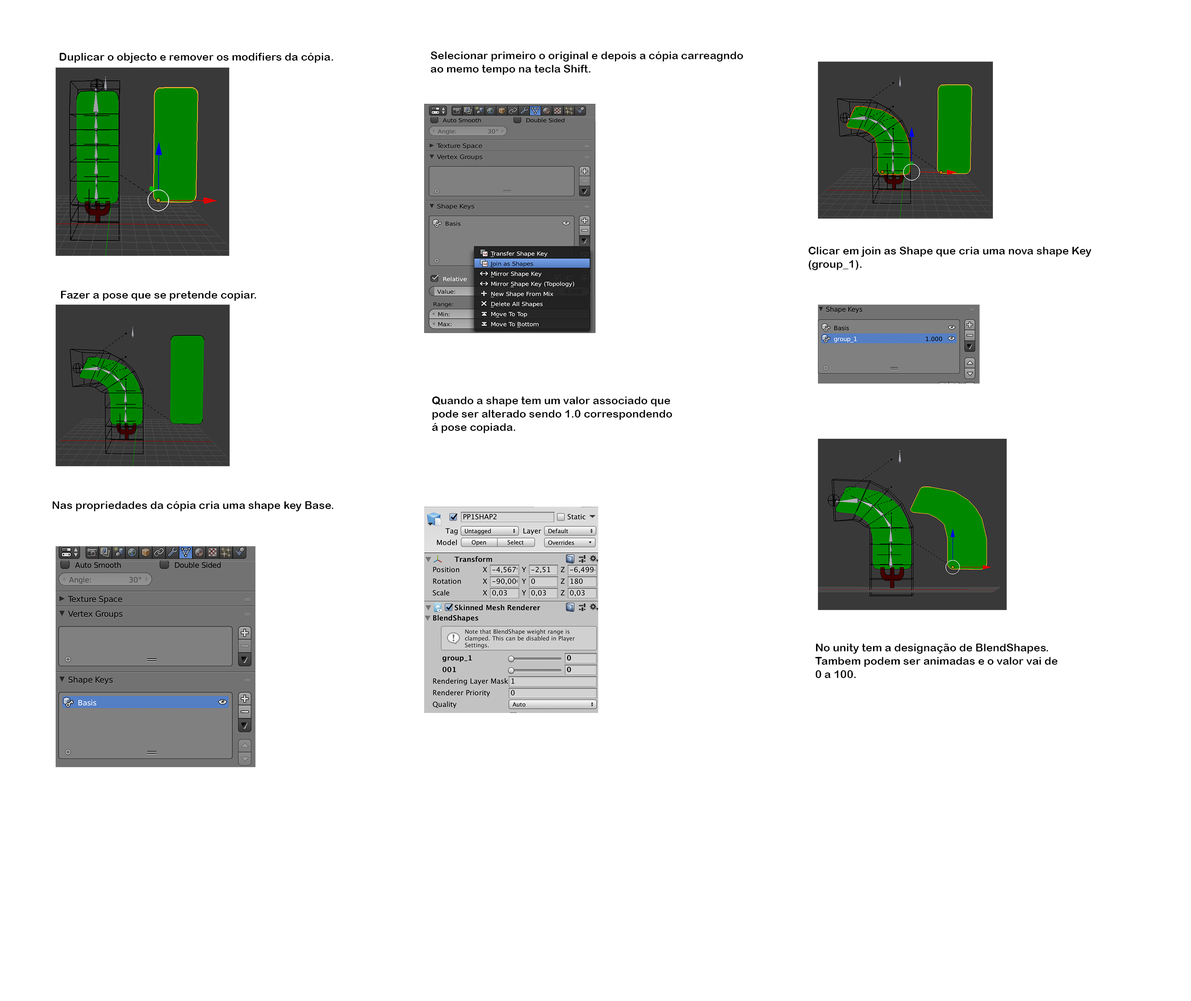
<style>
.page{position:relative;width:1191px;height:1001px;background:#ffffff}
.page>*{position:absolute;margin:0}
.t1{font:11px "ArialRoundedMTBold";color:#000000}
</style>
<div class="page">
<p class="t1" style="left:59px;top:53px;width:274px;height:10px">Duplicar o objecto e remover os modifiers da cópia.</p>
<p class="t1" style="left:431px;top:51px;width:312px;height:24px">Selecionar primeiro o original e depois a cópia carreagndo<br>ao memo tempo na tecla Shift.</p>
<p class="t1" style="left:808px;top:247px;width:283px;height:23px">Clicar em join as Shape que cria uma nova shape Key <br>(group_1).</p>
<p class="t1" style="left:61px;top:291px;width:195px;height:10px">Fazer a pose que se pretende copiar.</p>
<p class="t1" style="left:432px;top:397px;width:240px;height:36px">Quando a shape tem um valor associado que<br>pode ser alterado sendo 1.0 correspondendo<br>á pose copiada.</p>
<p class="t1" style="left:52px;top:501px;width:282px;height:10px">Nas propriedades da cópia cria uma shape key Base.</p>
<p class="t1" style="left:815px;top:643px;width:243px;height:35px">No unity tem a designação de BlendShapes.<br>Tambem podem ser animadas e o valor vai de<br>0 a 100.</p>
</div>
